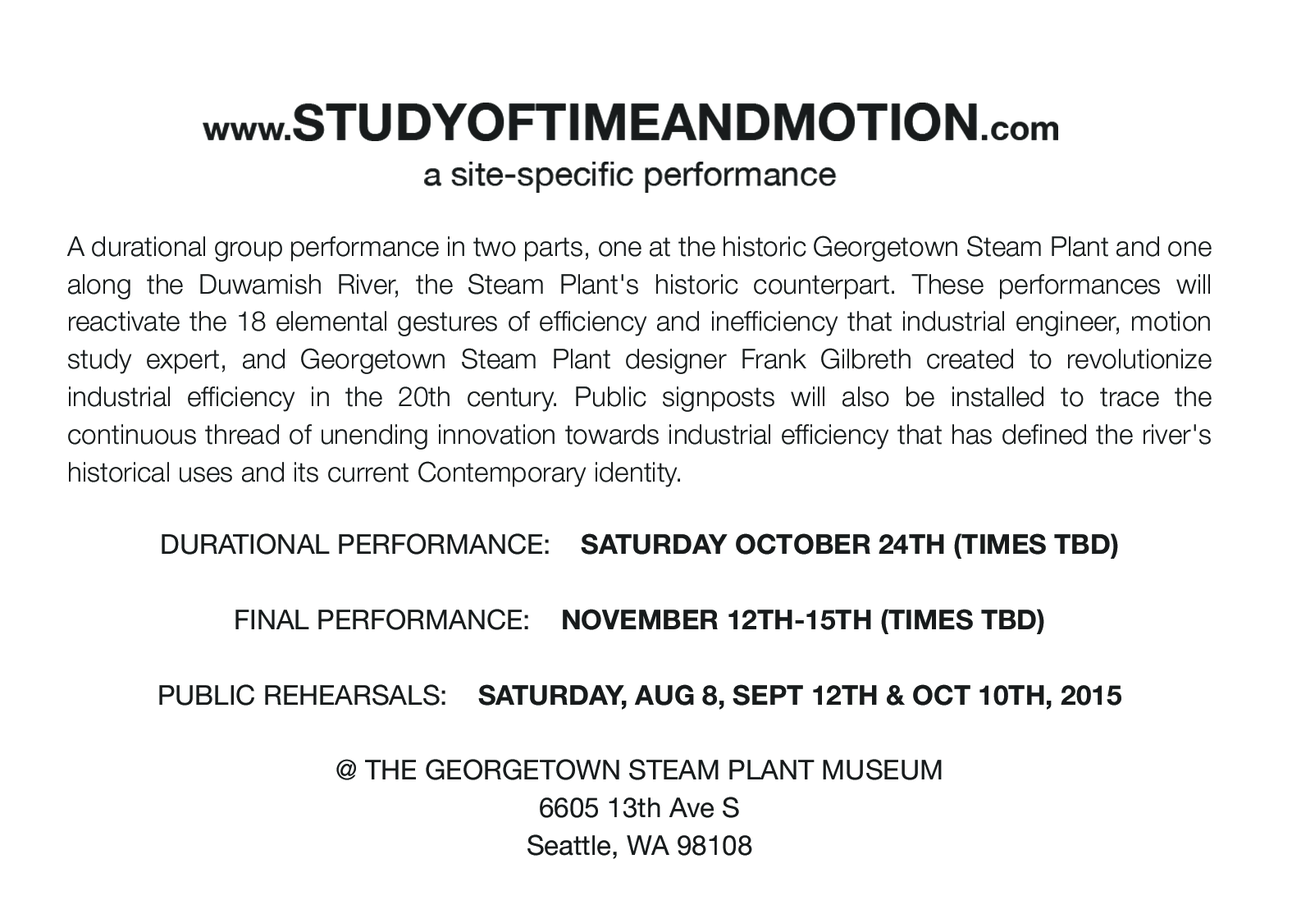
<style>
.page{position:relative;width:1292px;height:923px;background:#ffffff}
.page>*{position:absolute;margin:0}
.t1{font:27.3px/37.6px "HelveticaNeue-Light";color:#181b1c}
.t2{font:27.3px/37.6px "HelveticaNeue";color:#181b1c}
.t3{font:27.3px/37.6px "HelveticaNeue-Bold";color:#181b1c}
</style>
<div class="page">
<p class="t1" style="left:66px;top:235px;width:1146px;height:252px;text-align:justify">A durational group performance in two parts, one at the historic Georgetown Steam Plant and one along the Duwamish River, the Steam Plant's historic counterpart. These performances will reactivate the 18 elemental gestures of efficiency and inefficiency that industrial engineer, motion study expert, and Georgetown Steam Plant designer Frank Gilbreth created to revolutionize industrial efficiency in the 20th century. Public signposts will also be installed to trace the continuous thread of unending innovation towards industrial efficiency that has defined the river's historical uses and its current Contemporary identity.</p>
<p class="t2" style="left:159px;top:533px;width:962px;height:326px;text-align:center">DURATIONAL PERFORMANCE:    <span class="t3">SATURDAY OCTOBER 24TH (TIMES TBD)<br></span><br>FINAL PERFORMANCE:    <span class="t3">NOVEMBER 12TH-15TH (TIMES TBD)</span><br><br>PUBLIC REHEARSALS:    <span class="t3">SATURDAY, AUG 8, SEPT 12TH &amp; OCT 10TH, 2015<br><br></span>@ THE GEORGETOWN STEAM PLANT MUSEUM<br>6605 13th Ave S<br>Seattle, WA 98108</p>
</div>
